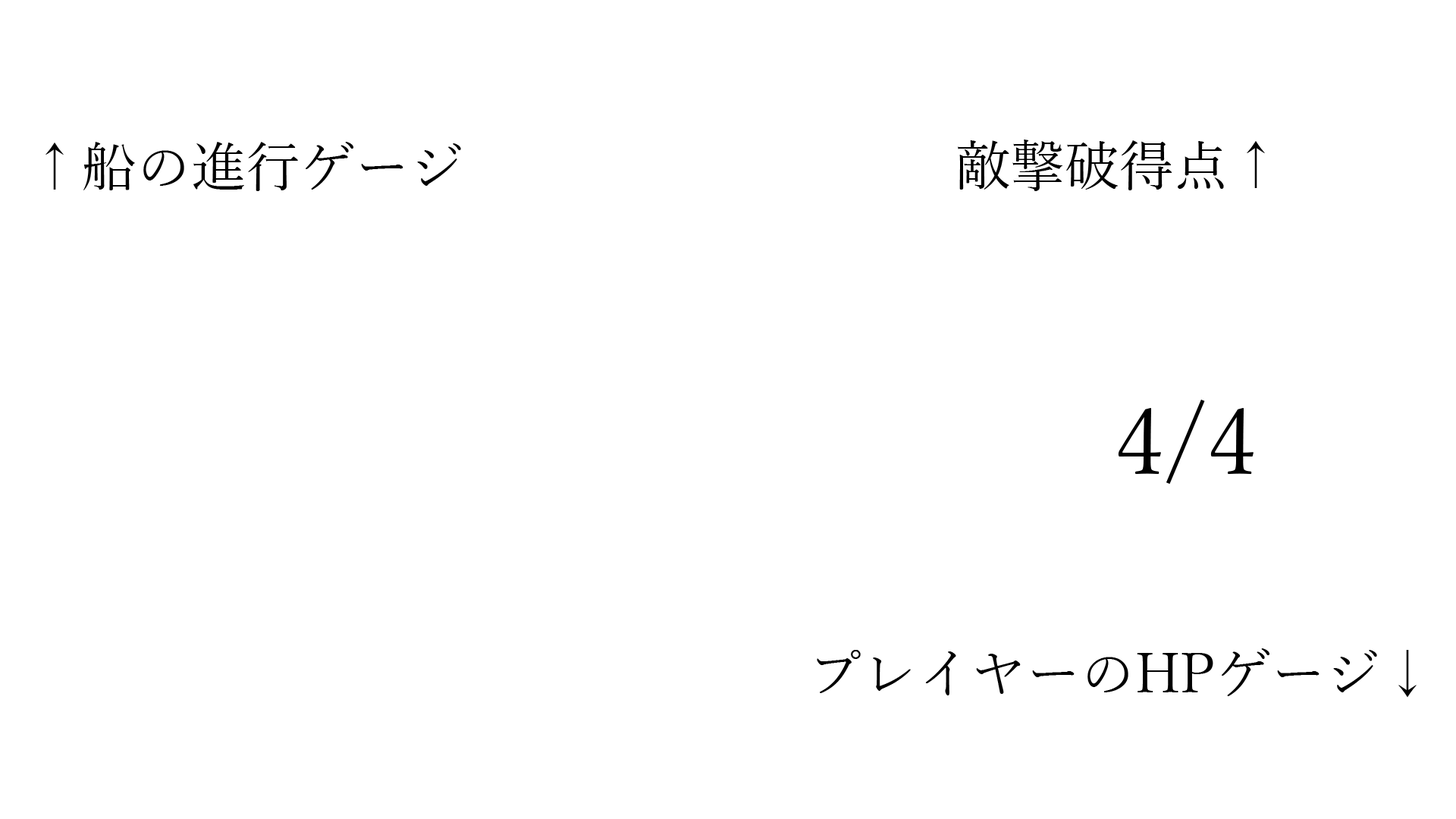
<style>
.page{position:relative;width:1456px;height:819px;background:#ffffff}
.page>*{position:absolute;margin:0}
.t1{font:54.6px "YuMincho-Regular";color:#000000}
.t2{font:91px "YuMincho-Regular";color:#000000}
</style>
<div class="page">
<p class="t1" style="left:45px;top:142px;width:416px;height:49px">↑船の進行ゲージ</p>
<p class="t1" style="left:958px;top:140px;width:307px;height:51px">敵撃破得点↑</p>
<p class="t2" style="left:1118px;top:400px;width:136px;height:84px">4/4</p>
<p class="t1" style="left:817px;top:648px;width:600px;height:50px">プレイヤーのHPゲージ↓</p>
</div>
